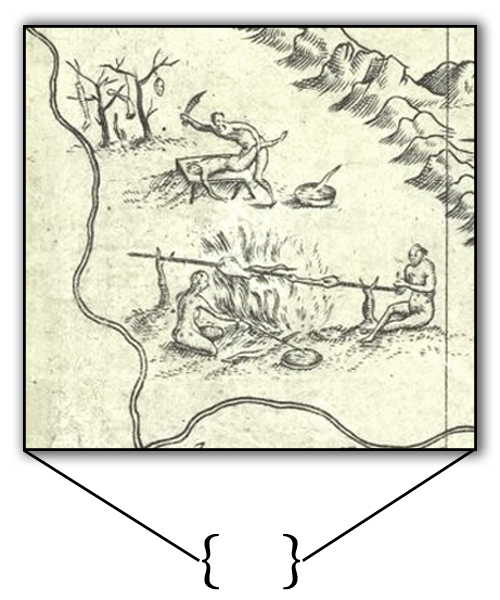
<style>
.page{position:relative;width:500px;height:600px;background:#ffffff}
.page>*{position:absolute;margin:0}
.t1{font:60px "ACaslonPro-Regular";color:#000000}
</style>
<div class="page">
<p class="t1" style="left:201px;top:534px;width:100px;height:56px">{    }</p>
</div>
